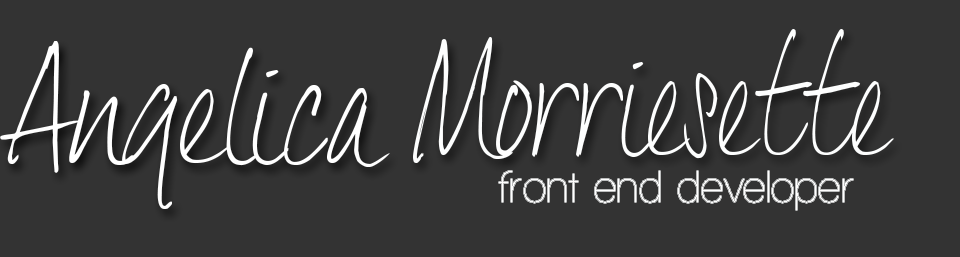
<style>
.page{position:relative;width:960px;height:257px;background:#333333}
.page>*{position:absolute;margin:0}
.t1{font:135px "DexteraTrial";color:#fdfefe;scale:0.86 1}
.t2{font:134.6px "DexteraTrial";color:#ffffff}
.t3{font:46.2px "WalkwayCondensed";color:#ffffff;scale:1.31 1}
</style>
<div class="page">
<p class="t1" style="left:413px;top:29px;width:481px;height:134px">Morriesette</p>
<p class="t2" style="left:0px;top:41px;width:390px;height:168px">Angelica</p>
<p class="t3" style="left:499px;top:171px;width:354px;height:39px">front end developer</p>
</div>
